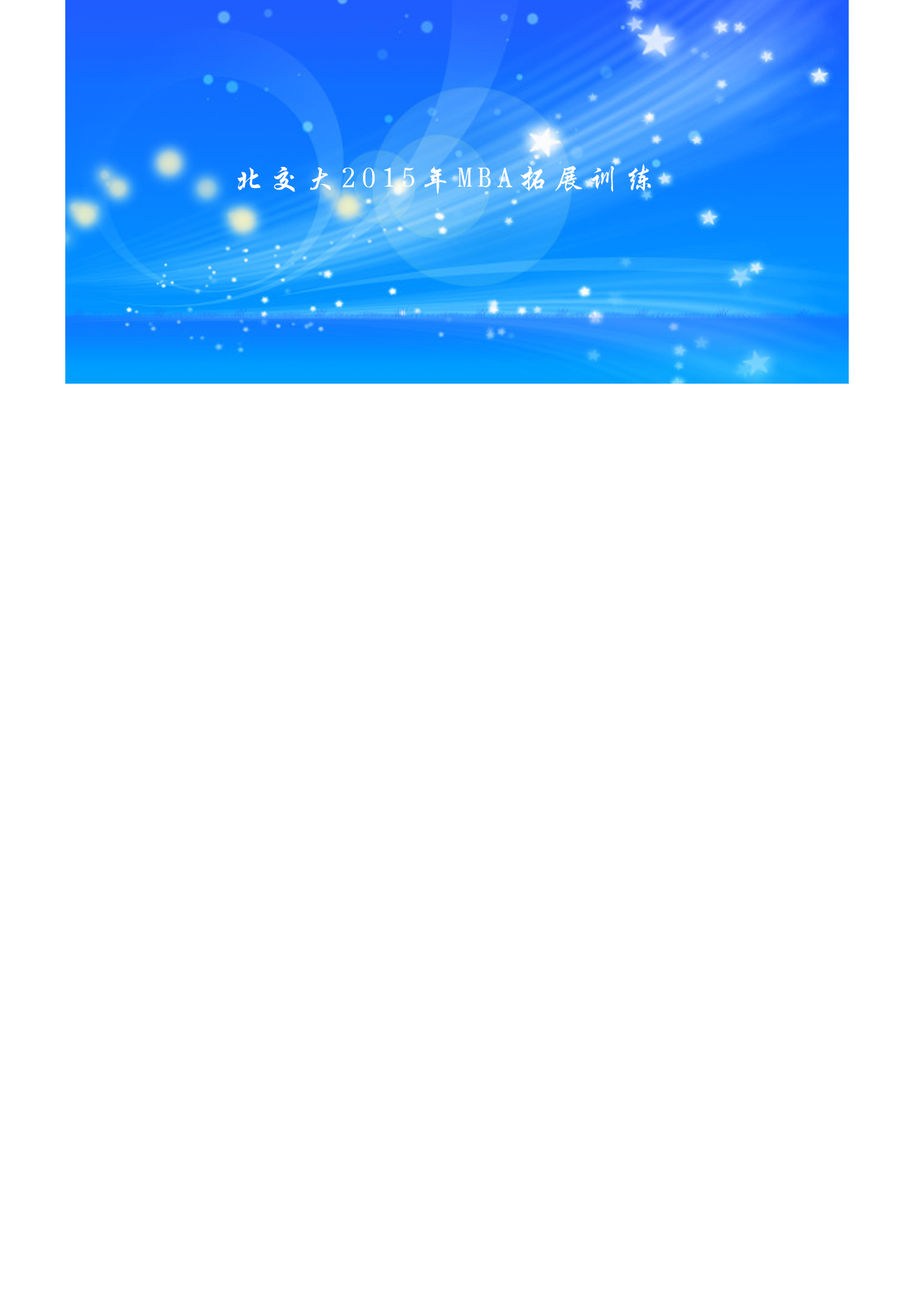
<style>
.page{position:relative;width:914px;height:1305px;background:#ffffff}
.page>*{position:absolute;margin:0}
.t1{font:31.3px "SingkaiCSEG-Bold-GB";letter-spacing:0.14em;color:#ffffff}
</style>
<div class="page">
<p class="t1" style="left:238px;top:164px;width:413px;height:30px">北交大2015年MBA拓展训练</p>
</div>
